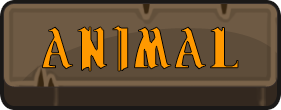
<style>
.page{position:relative;width:281px;height:110px}
.page>*{position:absolute;margin:0}
.t1{font:60px "Hangyaku";letter-spacing:0.1em;color:#ff9900;font-weight:bold}
</style>
<div class="page">
<p class="t1" style="left:41px;top:25px;width:198px;height:47px">ANIMAL</p>
</div>
